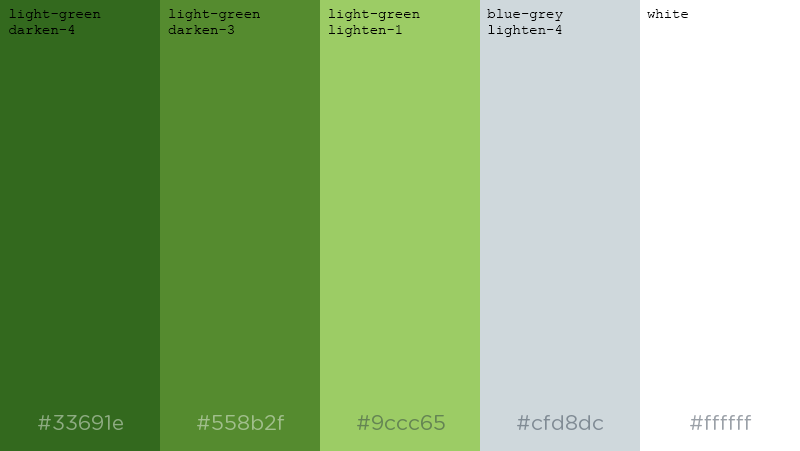
<style>
.page{position:relative;width:800px;height:451px;background:#ffffff}
.page>*{position:absolute;margin:0}
.t1{font:14px "CourierNewPSMT";color:#000000}
</style>
<div class="page">
<p class="t1" style="left:9px;top:9px;width:679px;height:28px">light-green        light-green        light-green        blue-grey          white<br> darken-4           darken-3           lighten-1          lighten-4</p>
</div>
